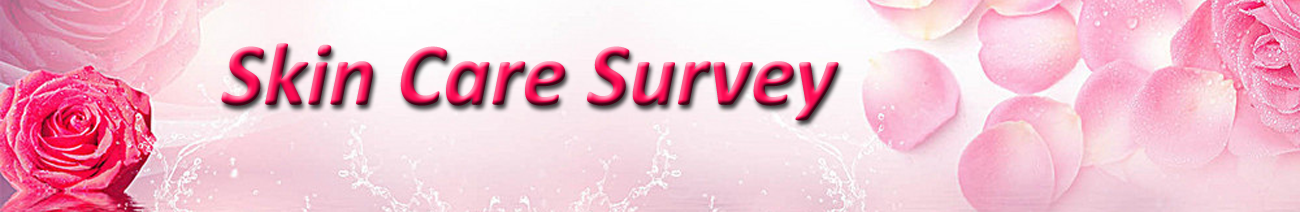
<style>
.page{position:relative;width:1300px;height:212px}
.page>*{position:absolute;margin:0}
.t1{font:90px "Calibri-BoldItalic"}
</style>
<div class="page">
<p class="t1" style="left:221px;top:43px;width:618px;height:78px">Skin Care Survey</p>
</div>
